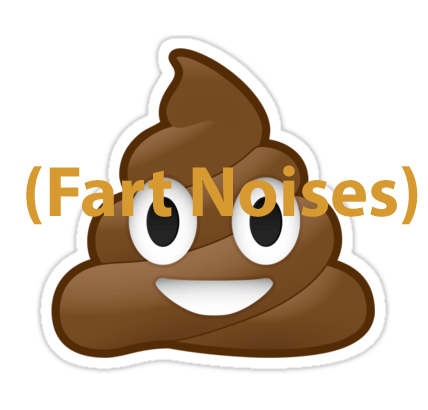
<style>
.page{position:relative;width:428px;height:410px;background:#ffffff}
.page>*{position:absolute;margin:0}
.t1{font:72px "MyriadPro-Bold";color:#d69a31}
</style>
<div class="page">
<p class="t1" style="left:26px;top:165px;width:392px;height:60px">(Fart Noises)</p>
</div>
